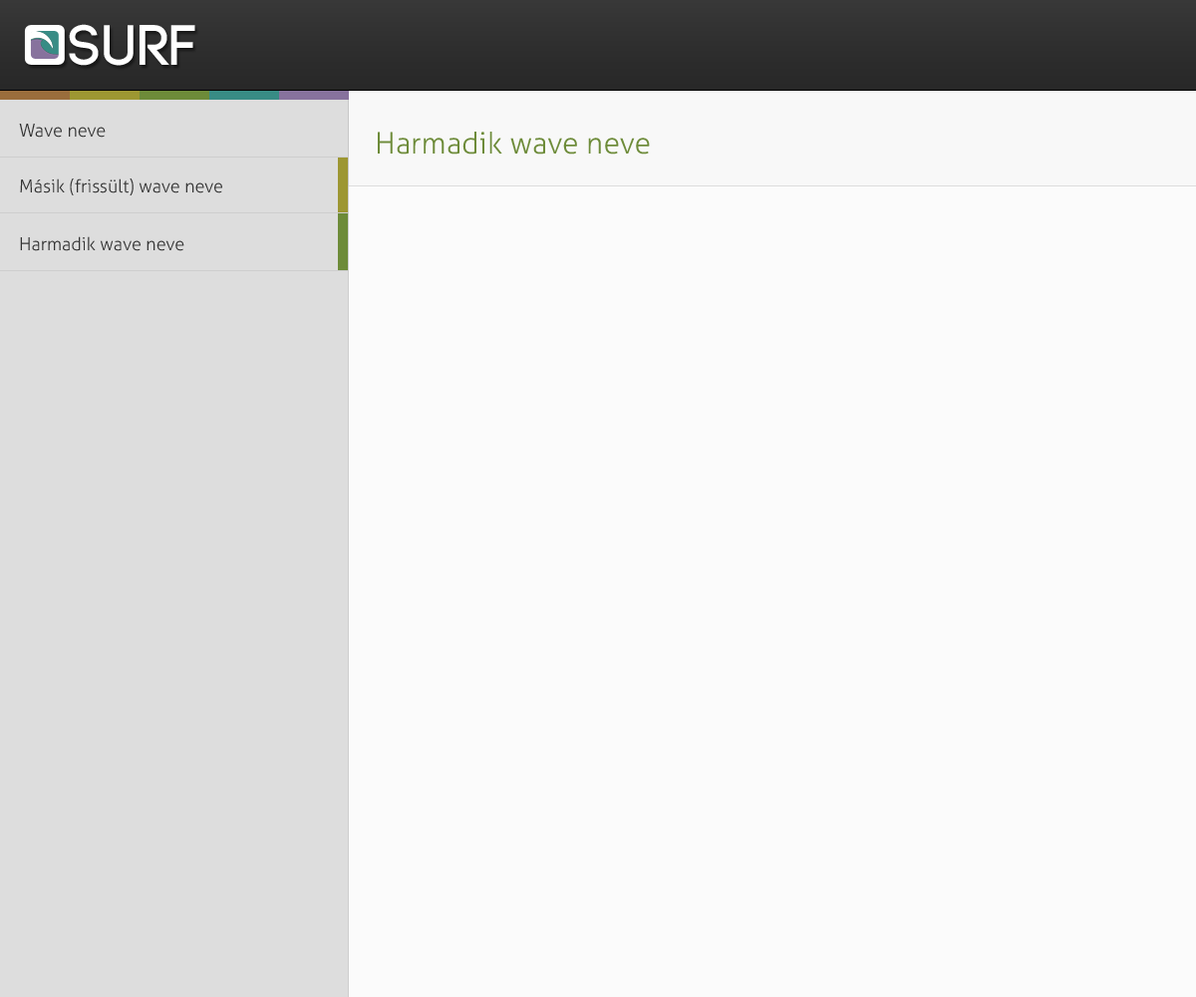
<style>
.page{position:relative;width:1196px;height:997px;background:#fbfbfb}
.page>*{position:absolute;margin:0}
.t1{font:56.8px "Code-Pro-Demo";color:#ffffff}
.t2{font:17.9px "Aller-Light";color:#333333}
.t3{font:29.9px "Aller-Light";color:#6d8b39}
</style>
<div class="page">
<p class="t1" style="left:69px;top:24px;width:126px;height:42px">SURF</p>
<p class="t2" style="left:19px;top:124px;width:87px;height:14px">Wave neve</p>
<p class="t3" style="left:378px;top:132px;width:272px;height:23px">Harmadik wave neve</p>
<p class="t2" style="left:20px;top:178px;width:202px;height:17px">Másik (frissült) wave neve</p>
<p class="t2" style="left:20px;top:236px;width:164px;height:15px">Harmadik wave neve</p>
</div>
